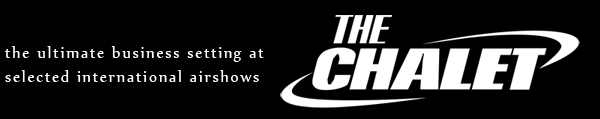
<style>
.page{position:relative;width:600px;height:119px;background:#000000}
.page>*{position:absolute;margin:0}
.t1{font:18px/24px "Nyala-Regular";letter-spacing:0.1em;color:#ffffff}
</style>
<div class="page">
<p class="t1" style="left:5px;top:46px;width:259px;height:36px">the ultimate business setting at<br>selected international airshows</p>
</div>
